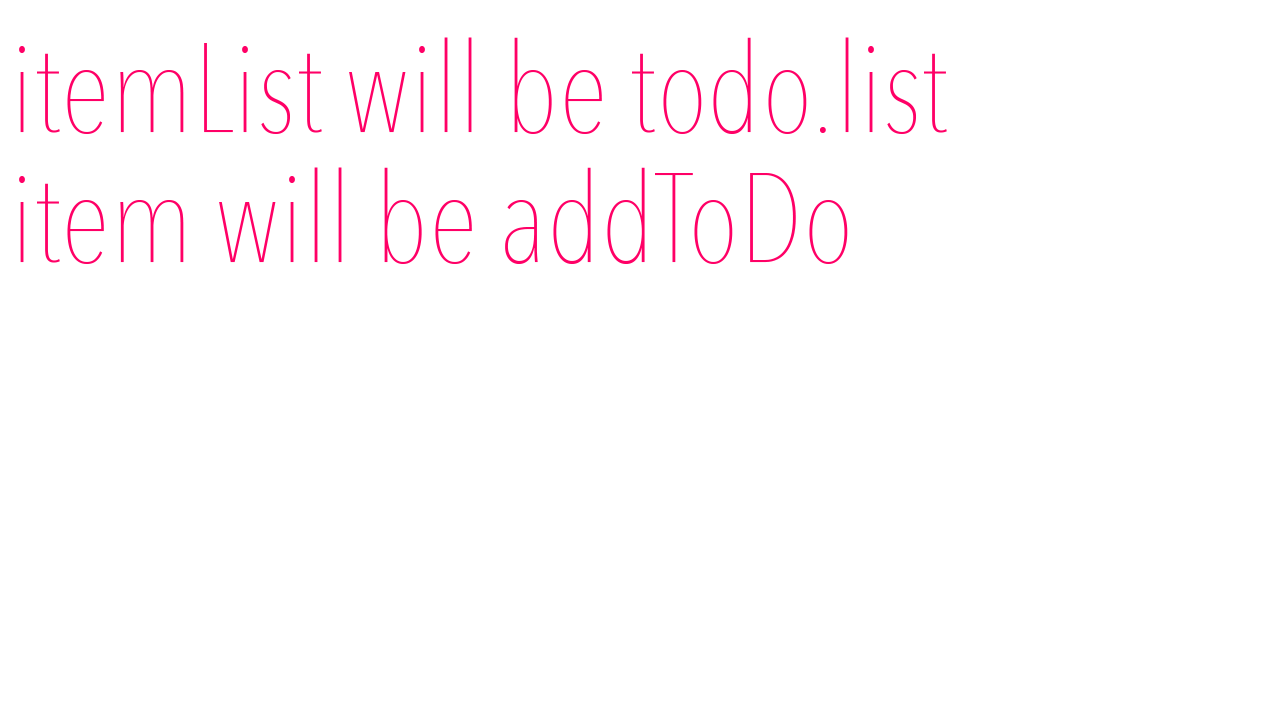
<style>
.page{position:relative;width:1280px;height:720px;background:#ffffff}
.page>*{position:absolute;margin:0}
.t1{font:125px "AvenirNextCondensed-UltraLight";color:#ff0066}
</style>
<div class="page">
<p class="t1" style="left:19px;top:37px;width:928px;height:227px">itemList will be todo.list<br>item will be addToDo</p>
</div>
